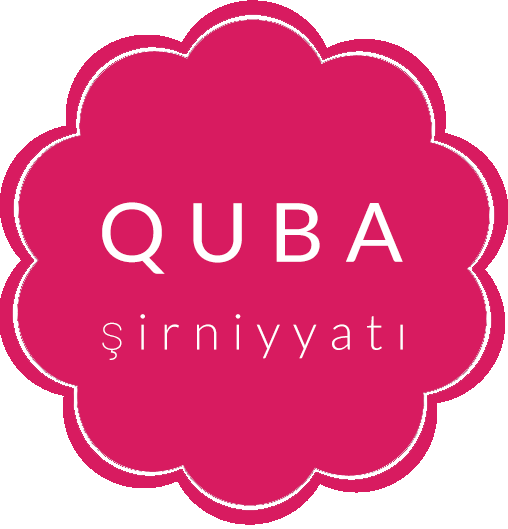
<style>
.page{position:relative;width:508px;height:529px;background:#d81b60}
.page>*{position:absolute;margin:0}
.t1{font:81.7px "Lato-Regular";letter-spacing:0.25em;color:#ffffff;scale:1.04 1}
.t2{font:49.5px "Lato-Light";letter-spacing:0.25em;color:#ffffff}
.t3{font:49.5px "Roboto-Thin";letter-spacing:0.25em;color:#ffffff}
</style>
<div class="page">
<p class="t1" style="left:102px;top:202px;width:301px;height:72px">QUBA</p>
<p class="t2" style="left:102px;top:314px;width:301px;height:46px"><span class="t3">ş</span>irniyyatı</p>
</div>
